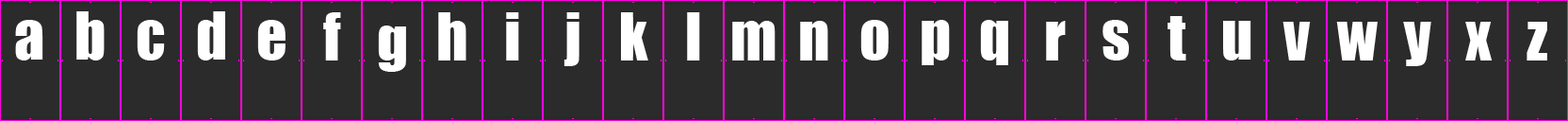
<style>
.page{position:relative;width:1568px;height:121px;background:#2b2b2b}
.page>*{position:absolute;margin:0}
.t1{font:60.3px "Impact";color:#ffffff}
</style>
<div class="page">
<p class="t1" style="left:76px;top:11px;width:29px;height:49px">b</p>
<p class="t1" style="left:197px;top:11px;width:28px;height:49px">d</p>
<p class="t1" style="left:323px;top:12px;width:18px;height:48px">f</p>
<p class="t1" style="left:438px;top:12px;width:28px;height:48px">h</p>
<p class="t1" style="left:506px;top:12px;width:13px;height:48px">i</p>
<p class="t1" style="left:564px;top:12px;width:16px;height:54px">j</p>
<p class="t1" style="left:621px;top:12px;width:27px;height:48px">k</p>
<p class="t1" style="left:687px;top:12px;width:13px;height:48px">l</p>
<p class="t1" style="left:1168px;top:16px;width:18px;height:44px">t</p>
<p class="t1" style="left:15px;top:20px;width:28px;height:40px">a</p>
<p class="t1" style="left:137px;top:20px;width:28px;height:40px">c</p>
<p class="t1" style="left:257px;top:20px;width:29px;height:40px">e</p>
<p class="t1" style="left:378px;top:25px;width:28px;height:47px">g</p>
<p class="t1" style="left:732px;top:21px;width:44px;height:39px">m</p>
<p class="t1" style="left:800px;top:21px;width:28px;height:39px">n</p>
<p class="t1" style="left:860px;top:20px;width:29px;height:40px">o</p>
<p class="t1" style="left:922px;top:20px;width:28px;height:45px">p</p>
<p class="t1" style="left:980px;top:20px;width:28px;height:45px">q</p>
<p class="t1" style="left:1046px;top:21px;width:20px;height:39px">r</p>
<p class="t1" style="left:1102px;top:20px;width:27px;height:40px">s</p>
<p class="t1" style="left:1223px;top:21px;width:28px;height:39px">u</p>
<p class="t1" style="left:1282px;top:22px;width:29px;height:38px">v</p>
<p class="t1" style="left:1336px;top:22px;width:42px;height:38px">w</p>
<p class="t1" style="left:1403px;top:22px;width:28px;height:44px">y</p>
<p class="t1" style="left:1465px;top:22px;width:28px;height:38px">x</p>
<p class="t1" style="left:1527px;top:22px;width:20px;height:38px">z</p>
</div>
